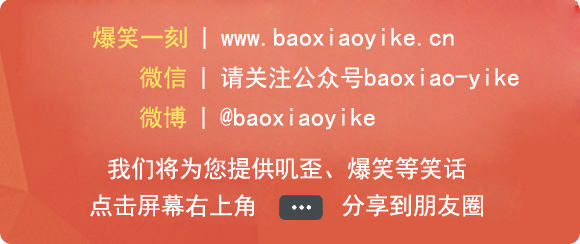
<style>
.page{position:relative;width:580px;height:244px}
.page>*{position:absolute;margin:0}
.t1{font:26px "SimHei";color:#ffffff}
.t2{font:24px "SimHei";color:#fae264}
.t3{font:22px "SimHei";color:#ffffff}
.t4{font:24px "SimHei";color:#ffffff}
</style>
<div class="page">
<p class="t1" style="left:93px;top:26px;width:361px;height:24px"><span class="t2">爆笑一刻</span><span class="t3"> | </span>www.baoxiaoyike.cn</p>
<p class="t1" style="left:140px;top:66px;width:379px;height:24px"><span class="t2">微信</span><span class="t3"> | </span><span class="t4">请关注公众号</span>baoxiao-yike</p>
<p class="t1" style="left:140px;top:106px;width:235px;height:24px"><span class="t2">微博</span><span class="t3"> | </span>@baoxiaoyike</p>
<p class="t4" style="left:108px;top:157px;width:358px;height:23px">我们将为您提供叽歪、爆笑等笑话</p>
<p class="t4" style="left:90px;top:194px;width:393px;height:23px">点击屏幕右上角       分享到朋友圈</p>
</div>
